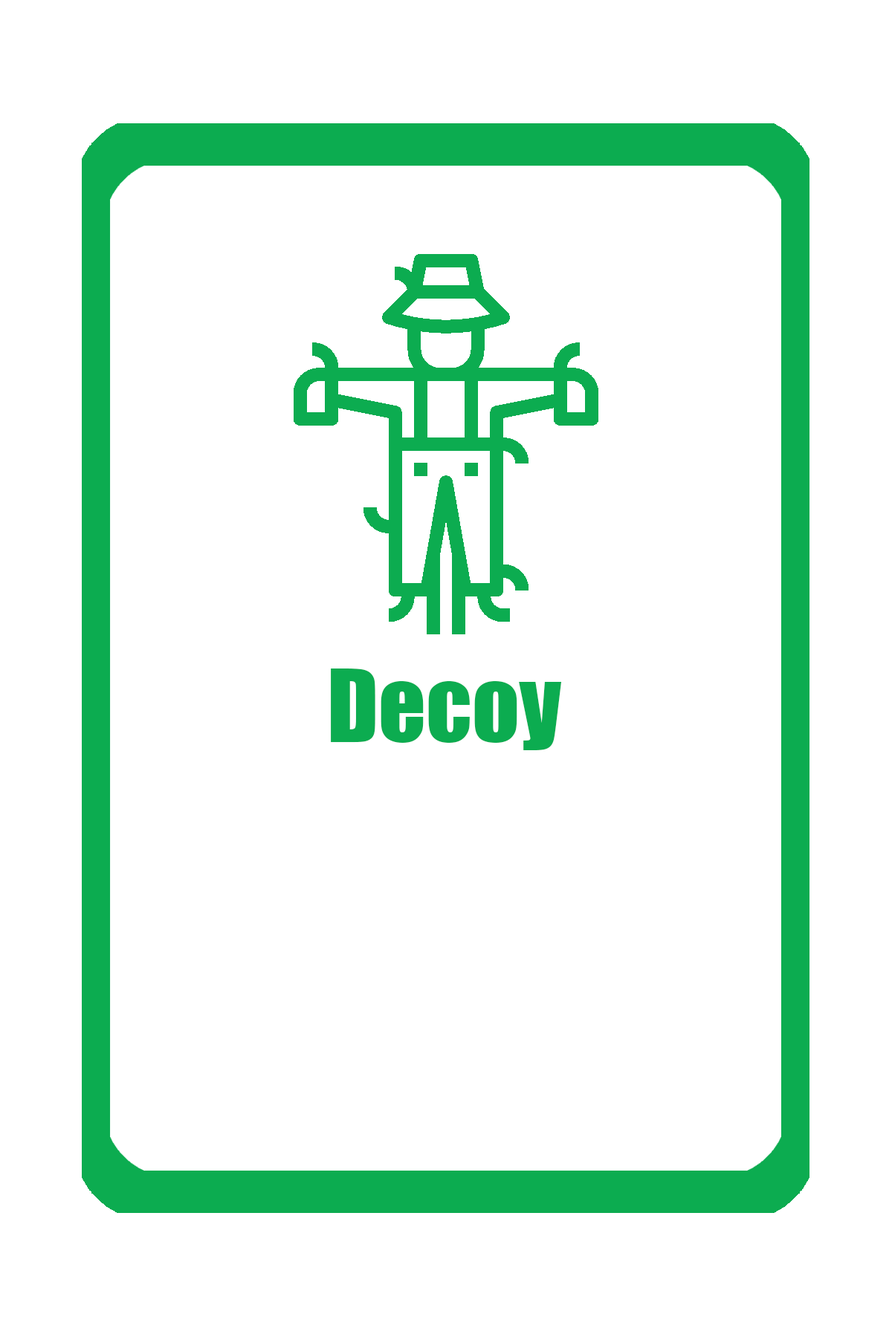
<style>
.page{position:relative;width:892px;height:1337px;background:#ffffff}
.page>*{position:absolute;margin:0}
.t1{font:92.9px "Impact";color:#0cac50}
</style>
<div class="page">
<p class="t1" style="left:331px;top:669px;width:231px;height:81px">Decoy</p>
</div>
